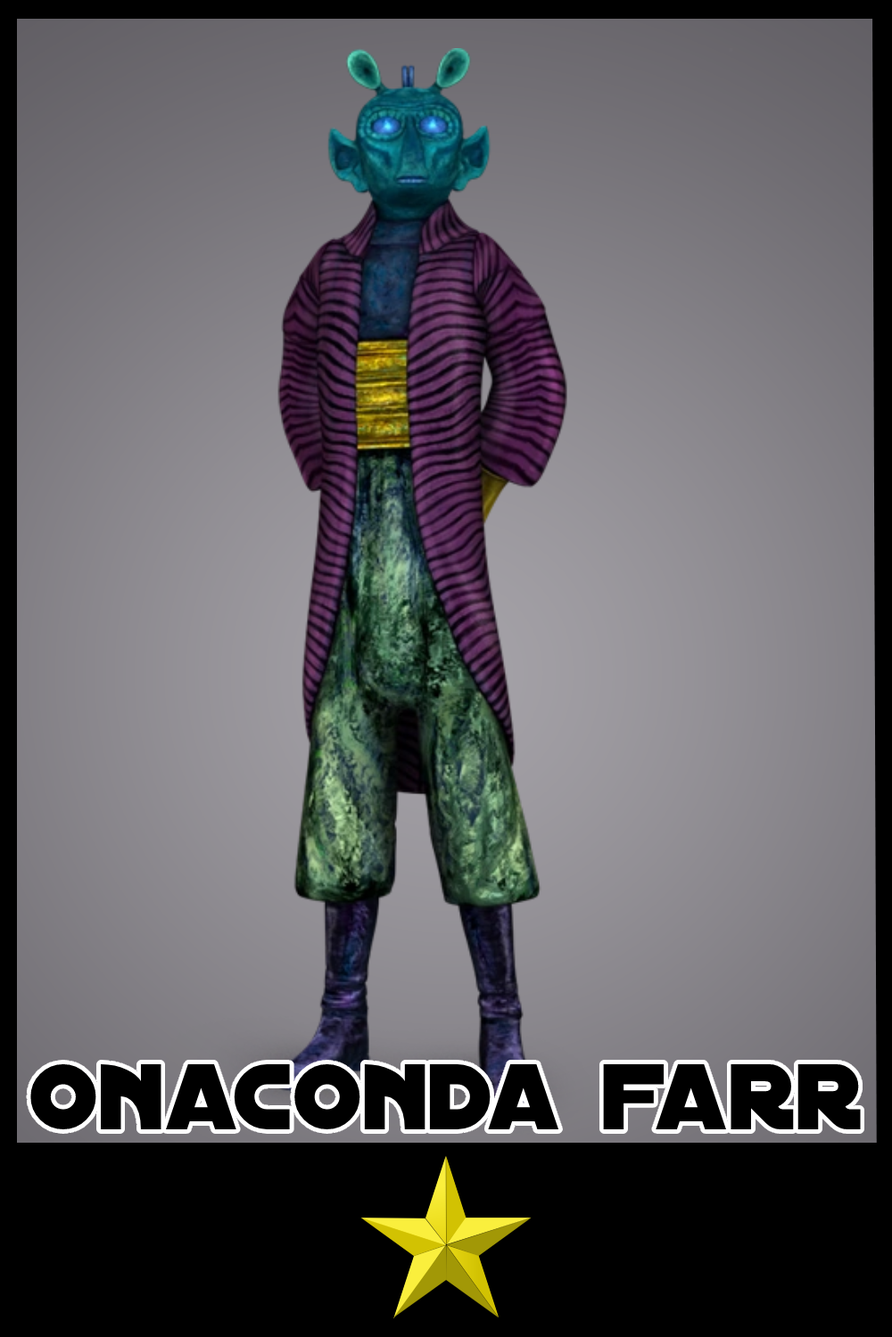
<style>
.page{position:relative;width:892px;height:1337px;background:#000000}
.page>*{position:absolute;margin:0}
.t1{font:100.2px "DistantGalaxy";color:#000000}
</style>
<div class="page">
<p class="t1" style="left:30px;top:1065px;width:830px;height:65px">onaconda farr</p>
</div>
